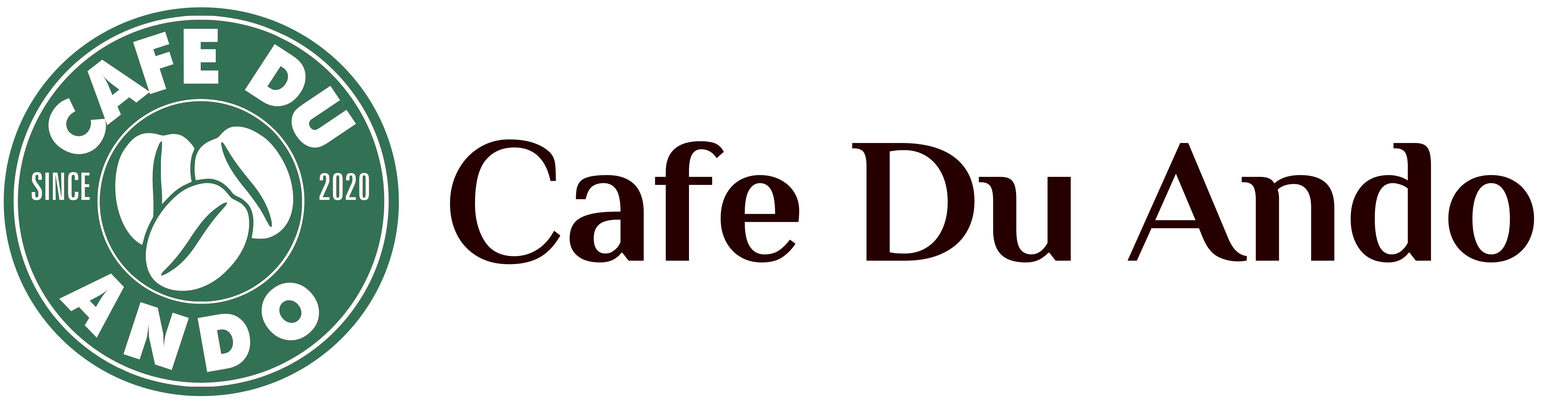
<style>
.page{position:relative;width:1568px;height:401px;background:#ffffff}
.page>*{position:absolute;margin:0}
.t1{font:178.4px "Philosopher-Bold";color:#260000}
</style>
<div class="page">
<p class="t1" style="left:450px;top:140px;width:1084px;height:125px">Cafe Du Ando</p>
</div>
